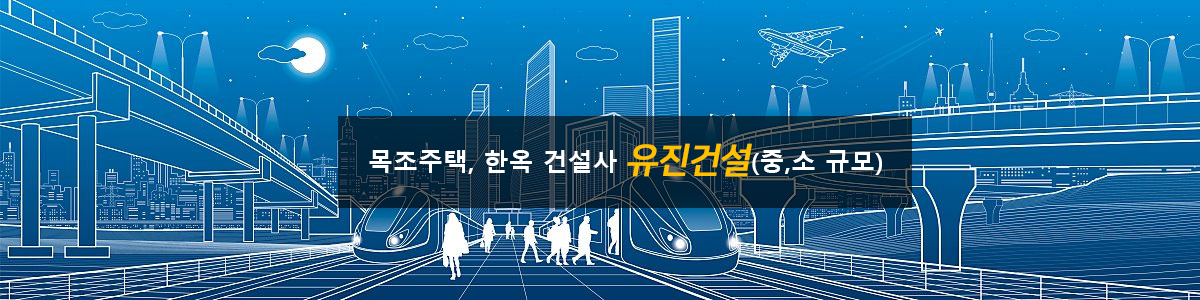
<style>
.page{position:relative;width:1200px;height:300px}
.page>*{position:absolute;margin:0}
.t1{font:25px "MalgunGothicBold";color:#ffffff}
.t2{font:35px "NanumSquare_acB";color:#ffc000;font-weight:bold;font-style:italic}
</style>
<div class="page">
<p class="t1" style="left:369px;top:143px;width:513px;height:34px">목조주택, 한옥 건설사 <span class="t2">유진건설</span>(중,소 규모)</p>
</div>
